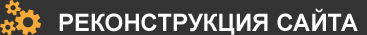
<style>
.page{position:relative;width:367px;height:35px;background:#333333}
.page>*{position:absolute;margin:0}
.t1{font:24px "Arial-BoldMT";color:#ffffff}
</style>
<div class="page">
<p class="t1" style="left:59px;top:8px;width:299px;height:27px">РЕКОНСТРУКЦИЯ САЙТА</p>
</div>
